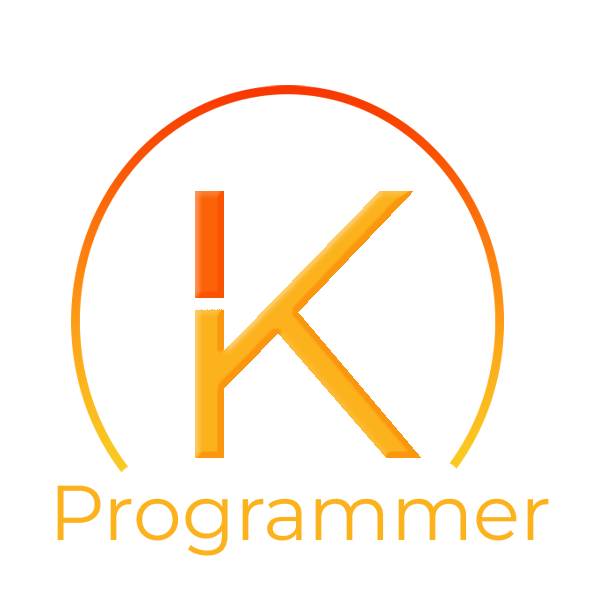
<style>
.page{position:relative;width:600px;height:600px;background:#ffffff}
.page>*{position:absolute;margin:0}
.t1{font:77.6px "MontserratRoman-Regular";color:#fcb21c}
</style>
<div class="page">
<p class="t1" style="left:57px;top:485px;width:492px;height:71px">Programmer</p>
</div>
